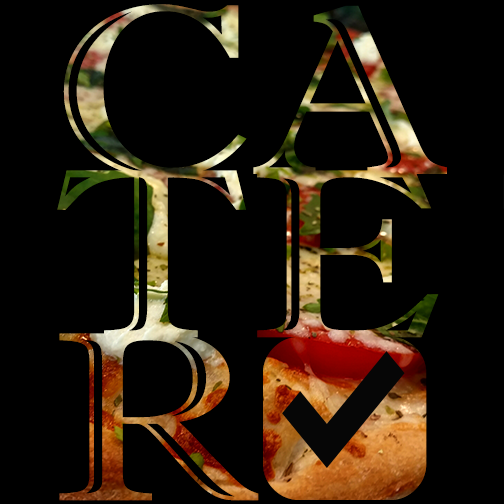
<style>
.page{position:relative;width:504px;height:504px;background:#000000}
.page>*{position:absolute;margin:0}
.t1{font:241.5px/163px "ImprintMT-Shadow";scale:1.13 1}
.t2{font:170px "Caliper-Symbols-Regular"}
</style>
<div class="page">
<p class="t1" style="left:57px;top:4px;width:390px;height:497px">CA<br>TE<br>R</p>
<p class="t2" style="left:263px;top:336px;width:164px;height:164px">J</p>
</div>
